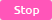
<style>
.page{position:relative;width:52px;height:20px;background:#ff56b9}
.page>*{position:absolute;margin:0}
.t1{font:12px "Ubuntu-Medium";color:#ffffff}
</style>
<div class="page">
<p class="t1" style="left:14px;top:6px;width:26px;height:10px">Stop</p>
</div>
